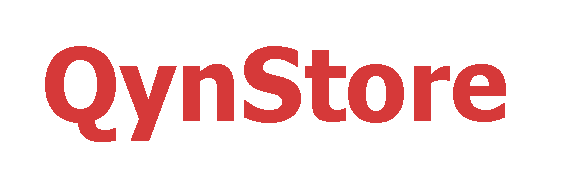
<style>
.page{position:relative;width:568px;height:177px;background:#ffffff}
.page>*{position:absolute;margin:0}
.t1{font:100px "Tahoma-Bold";color:#d63939}
</style>
<div class="page">
<p class="t1" style="left:45px;top:46px;width:461px;height:96px">QynStore</p>
</div>
